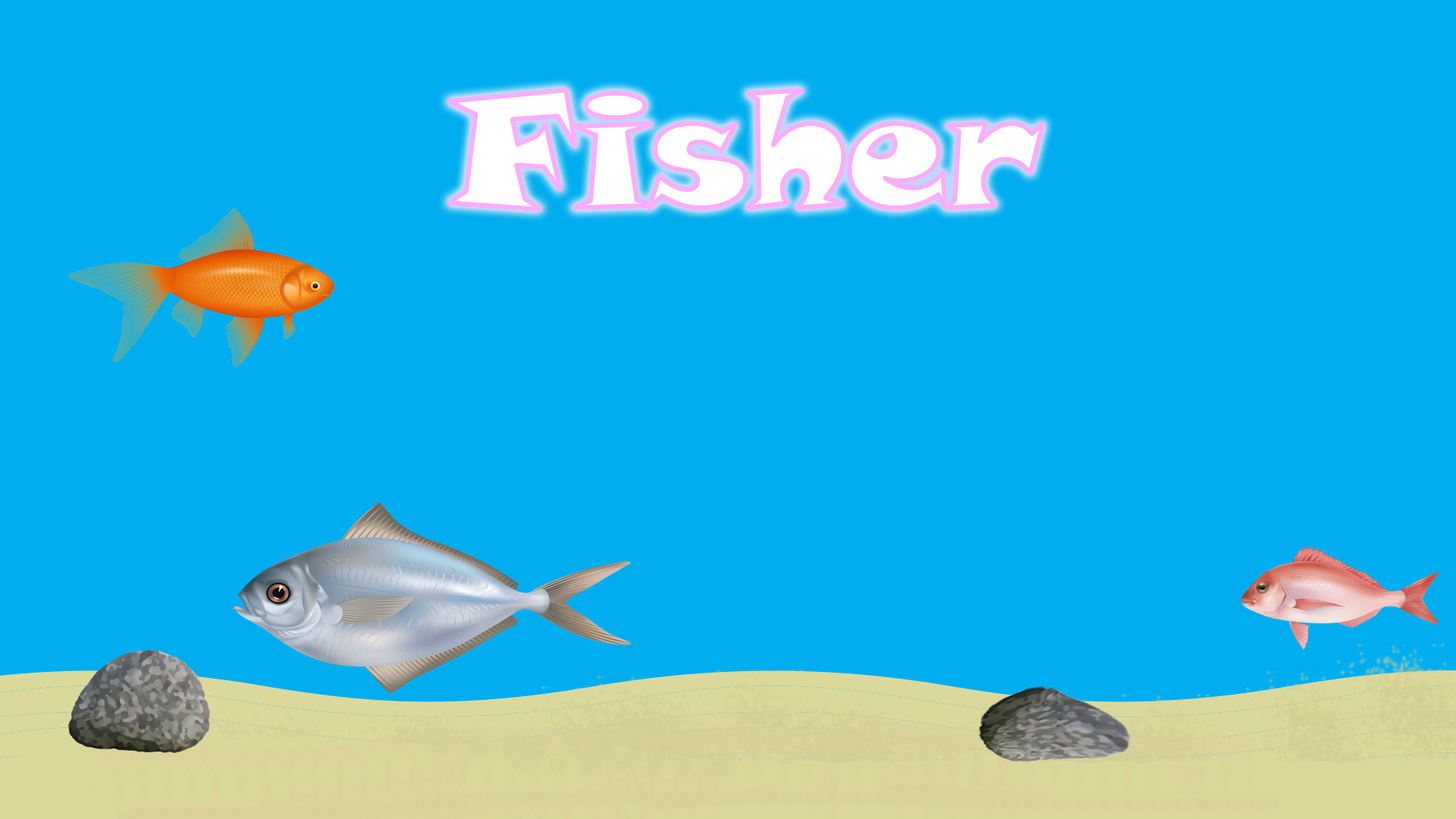
<style>
.page{position:relative;width:1456px;height:819px;background:#00aef0}
.page>*{position:absolute;margin:0}
.t1{font:198.3px "TolstyakHeavy";letter-spacing:0.005em;color:#ffffff}
</style>
<div class="page">
<p class="t1" style="left:449px;top:90px;width:594px;height:119px">Fisher</p>
</div>
